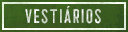
<style>
.page{position:relative;width:128px;height:32px}
.page>*{position:absolute;margin:0}
.t1{font:18.7px "HillstownCondensedClean";letter-spacing:0.1em;color:#d0d8c9;text-transform:uppercase}
</style>
<div class="page">
<p class="t1" style="left:25px;top:6px;width:76px;height:18px">Vestiários</p>
</div>
